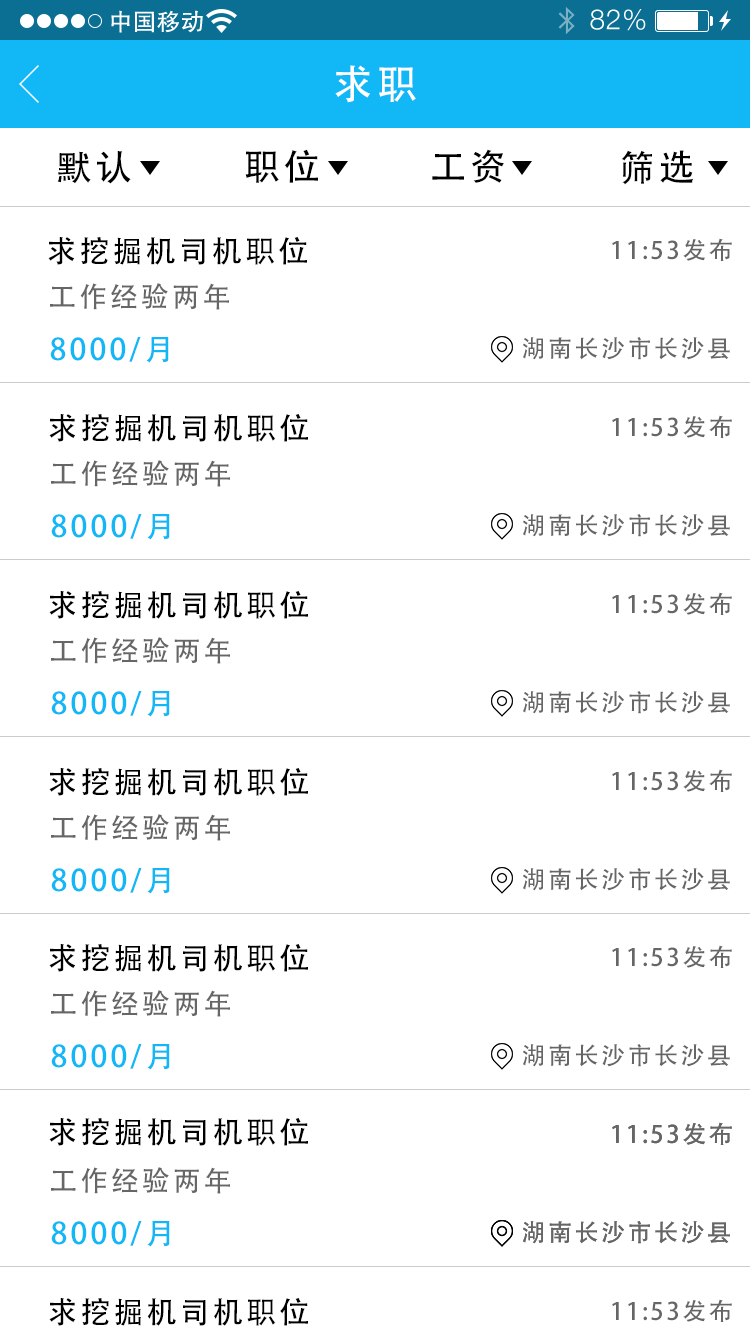
<style>
.page{position:relative;width:750px;height:1334px;background:#ffffff}
.page>*{position:absolute;margin:0}
.t1{font:40px "AdobeHeitiStd-Regular";letter-spacing:0.104em;color:#ffffff}
.t2{font:36px "AdobeHeitiStd-Regular";letter-spacing:0.104em;color:#000000}
.t3{font:30px "AdobeHeitiStd-Regular";letter-spacing:0.104em;color:#000000}
.t4{font:24px "AdobeHeitiStd-Regular";letter-spacing:0.104em;color:#666666}
.t5{font:28px "AdobeHeitiStd-Regular";letter-spacing:0.104em;color:#666666}
.t6{font:30px "AdobeHeitiStd-Regular";letter-spacing:0.104em;color:#12b8f6}
</style>
<div class="page">
<p class="t1" style="left:335px;top:65px;width:81px;height:38px">求职</p>
<p class="t2" style="left:245px;top:149px;width:73px;height:34px">职位</p>
<p class="t2" style="left:432px;top:149px;width:72px;height:34px">工资</p>
<p class="t2" style="left:621px;top:150px;width:73px;height:35px">筛选</p>
<p class="t2" style="left:57px;top:151px;width:74px;height:33px">默认</p>
<p class="t3" style="left:48px;top:236px;width:259px;height:29px">求挖掘机司机职位</p>
<p class="t4" style="left:612px;top:238px;width:120px;height:23px">11:53发布</p>
<p class="t5" style="left:50px;top:283px;width:179px;height:27px">工作经验两年</p>
<p class="t6" style="left:50px;top:337px;width:119px;height:26px">8000/月</p>
<p class="t4" style="left:523px;top:337px;width:207px;height:23px">湖南长沙市长沙县</p>
<p class="t3" style="left:49px;top:413px;width:259px;height:29px">求挖掘机司机职位</p>
<p class="t4" style="left:612px;top:415px;width:120px;height:23px">11:53发布</p>
<p class="t5" style="left:51px;top:460px;width:179px;height:27px">工作经验两年</p>
<p class="t6" style="left:51px;top:514px;width:119px;height:26px">8000/月</p>
<p class="t4" style="left:523px;top:514px;width:207px;height:23px">湖南长沙市长沙县</p>
<p class="t3" style="left:49px;top:590px;width:259px;height:29px">求挖掘机司机职位</p>
<p class="t4" style="left:612px;top:592px;width:120px;height:23px">11:53发布</p>
<p class="t5" style="left:51px;top:637px;width:179px;height:27px">工作经验两年</p>
<p class="t6" style="left:51px;top:691px;width:119px;height:26px">8000/月</p>
<p class="t4" style="left:523px;top:691px;width:207px;height:23px">湖南长沙市长沙县</p>
<p class="t3" style="left:49px;top:767px;width:259px;height:29px">求挖掘机司机职位</p>
<p class="t4" style="left:612px;top:769px;width:120px;height:23px">11:53发布</p>
<p class="t5" style="left:51px;top:814px;width:179px;height:27px">工作经验两年</p>
<p class="t6" style="left:51px;top:868px;width:119px;height:26px">8000/月</p>
<p class="t4" style="left:523px;top:868px;width:207px;height:23px">湖南长沙市长沙县</p>
<p class="t3" style="left:49px;top:943px;width:259px;height:29px">求挖掘机司机职位</p>
<p class="t4" style="left:612px;top:945px;width:120px;height:23px">11:53发布</p>
<p class="t5" style="left:51px;top:990px;width:179px;height:27px">工作经验两年</p>
<p class="t6" style="left:51px;top:1044px;width:119px;height:26px">8000/月</p>
<p class="t4" style="left:523px;top:1044px;width:207px;height:23px">湖南长沙市长沙县</p>
<p class="t3" style="left:49px;top:1117px;width:259px;height:29px">求挖掘机司机职位</p>
<p class="t4" style="left:612px;top:1122px;width:120px;height:23px">11:53发布</p>
<p class="t4" style="left:612px;top:1122px;width:120px;height:23px">11:53发布</p>
<p class="t5" style="left:51px;top:1167px;width:179px;height:27px">工作经验两年</p>
<p class="t6" style="left:51px;top:1221px;width:119px;height:26px">8000/月</p>
<p class="t4" style="left:523px;top:1221px;width:207px;height:23px">湖南长沙市长沙县</p>
<p class="t4" style="left:523px;top:1221px;width:207px;height:23px">湖南长沙市长沙县</p>
<p class="t3" style="left:49px;top:1297px;width:259px;height:29px">求挖掘机司机职位</p>
<p class="t4" style="left:612px;top:1299px;width:120px;height:23px">11:53发布</p>
</div>
